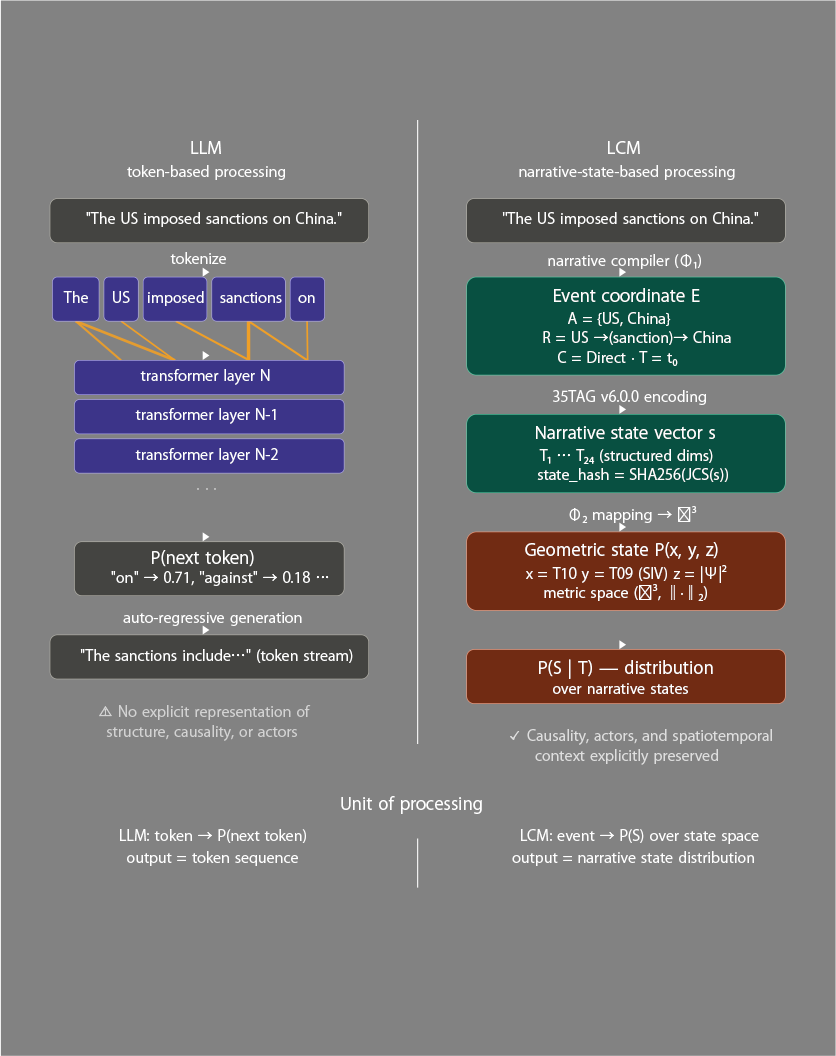
<style>
.page{position:relative;width:836px;height:1056px;background:#828282}
.page>*{position:absolute;margin:0}
.t1{font:17.2px "KozGoPr6N-Regular";color:#ffffff}
.t2{font:14.7px "KozGoPr6N-Regular";color:#ffffff}
.t3{font:14.7px "KozGoPr6N-Regular"}
.t4{font:14.7px "KozGoPr6N-Regular";color:#d3d3d3}
.t5{font:14.7px "KozGoPr6N-Regular";color:#dedede}
</style>
<div class="page">
<p class="t1" style="left:191px;top:141px;width:30px;height:13px">LLM</p>
<p class="t1" style="left:608px;top:141px;width:32px;height:13px">LCM</p>
<p class="t2" style="left:127px;top:165px;width:158px;height:15px">token-based processing</p>
<p class="t2" style="left:519px;top:165px;width:216px;height:15px">narrative-state-based processing</p>
<p class="t2" style="left:86px;top:212px;width:256px;height:15px">"The US imposed sanctions on China."</p>
<p class="t2" style="left:502px;top:212px;width:257px;height:15px">"The US imposed sanctions on China."</p>
<p class="t2" style="left:170px;top:252px;width:56px;height:12px">tokenize</p>
<p class="t2" style="left:548px;top:254px;width:153px;height:15px">narrative compiler (Φ₁)</p>
<p class="t2" style="left:63px;top:291px;width:25px;height:12px">The</p>
<p class="t2" style="left:113px;top:291px;width:17px;height:12px">US</p>
<p class="t2" style="left:148px;top:291px;width:56px;height:15px">imposed</p>
<p class="t2" style="left:220px;top:292px;width:62px;height:11px">sanctions</p>
<p class="t1" style="left:554px;top:288px;width:146px;height:14px">Event coordinate E</p>
<p class="t2" style="left:298px;top:295px;width:17px;height:8px">on</p>
<p class="t2" style="left:568px;top:312px;width:103px;height:15px">A = {US, China}</p>
<p class="t2" style="left:543px;top:331px;width:188px;height:14px">R = US →(sanction)→ China</p>
<p class="t2" style="left:558px;top:351px;width:120px;height:15px">C = Direct · T = t₀</p>
<p class="t2" style="left:140px;top:369px;width:130px;height:16px">transformer layer N</p>
<p class="t2" style="left:553px;top:390px;width:153px;height:15px">35TAG v6.0.0 encoding</p>
<p class="t2" style="left:135px;top:408px;width:141px;height:16px">transformer layer N-1</p>
<p class="t1" style="left:536px;top:426px;width:179px;height:13px">Narrative state vector s</p>
<p class="t2" style="left:135px;top:448px;width:143px;height:16px">transformer layer N-2</p>
<p class="t2" style="left:539px;top:449px;width:174px;height:15px">T₁ … T₂₄ (structured dims)</p>
<p class="t2" style="left:537px;top:468px;width:191px;height:14px">state_hash = SHA256(JCS(s))</p>
<p class="t3" style="left:197px;top:488px;width:19px;height:2px">· · ·</p>
<p class="t2" style="left:569px;top:506px;width:128px;height:17px">Φ₂ mapping → ℝ³</p>
<p class="t1" style="left:525px;top:542px;width:193px;height:18px">Geometric state P(x, y, z)</p>
<p class="t1" style="left:152px;top:550px;width:102px;height:17px">P(next token)</p>
<p class="t2" style="left:526px;top:565px;width:201px;height:18px">x = T10 y = T09 (SIV) z = |Ψ|²</p>
<p class="t2" style="left:111px;top:571px;width:218px;height:15px">"on" → 0.71, "against" → 0.18 …</p>
<p class="t2" style="left:544px;top:584px;width:163px;height:17px">metric space (ℝ³, ‖·‖₂)</p>
<p class="t2" style="left:123px;top:612px;width:179px;height:14px">auto-regressive generation</p>
<p class="t2" style="left:80px;top:649px;width:273px;height:14px">"The sanctions include…" (token stream)</p>
<p class="t1" style="left:539px;top:659px;width:174px;height:20px">P(S | T) — distribution</p>
<p class="t2" style="left:553px;top:683px;width:135px;height:11px">over narrative states</p>
<p class="t4" style="left:99px;top:705px;width:212px;height:15px">⚠ No explicit representation of</p>
<p class="t4" style="left:106px;top:725px;width:191px;height:16px">structure, causality, or actors</p>
<p class="t5" style="left:510px;top:729px;width:262px;height:16px">✓ Causality, actors, and spatiotemporal</p>
<p class="t5" style="left:535px;top:749px;width:183px;height:16px">context explicitly preserved</p>
<p class="t1" style="left:341px;top:796px;width:141px;height:18px">Unit of processing</p>
<p class="t2" style="left:120px;top:829px;width:186px;height:14px">LLM: token → P(next token)</p>
<p class="t2" style="left:521px;top:829px;width:238px;height:15px">LCM: event → P(S) over state space</p>
<p class="t2" style="left:127px;top:851px;width:171px;height:15px">output = token sequence</p>
<p class="t2" style="left:512px;top:851px;width:242px;height:15px">output = narrative state distribution</p>
</div>
